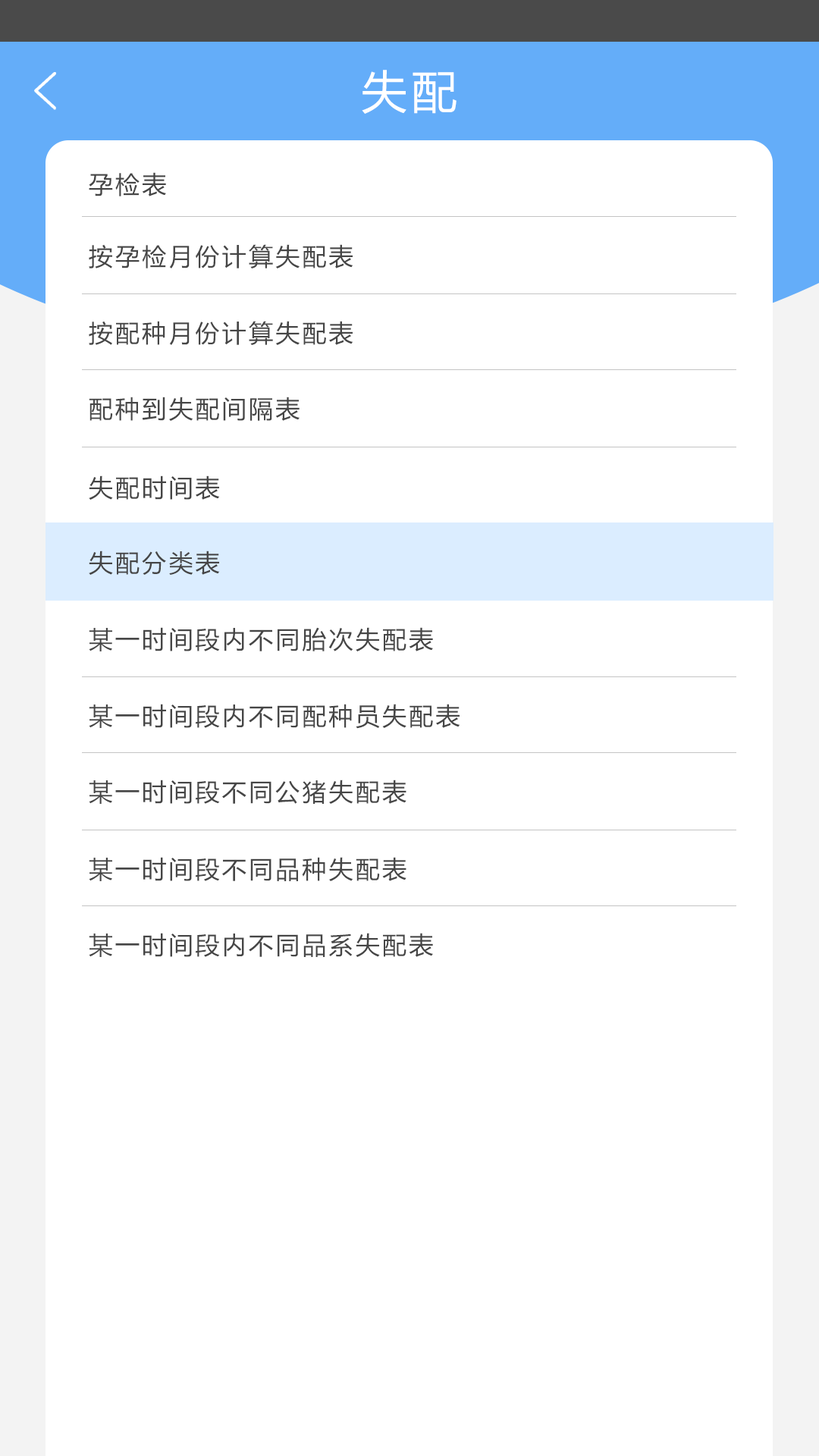
<style>
.page{position:relative;width:819px;height:1456px;background:#ffffff}
.page>*{position:absolute;margin:0}
.t1{font:45.5px "MicrosoftYaHei";letter-spacing:0.1em;color:#ffffff}
.t2{font:24.3px "MicrosoftYaHei";letter-spacing:0.1em;color:#464646}
</style>
<div class="page">
<p class="t1" style="left:362px;top:70px;width:95px;height:44px">失配</p>
<p class="t2" style="left:89px;top:172px;width:77px;height:24px">孕检表</p>
<p class="t2" style="left:89px;top:244px;width:264px;height:24px">按孕检月份计算失配表</p>
<p class="t2" style="left:89px;top:321px;width:264px;height:24px">按配种月份计算失配表</p>
<p class="t2" style="left:89px;top:397px;width:211px;height:24px">配种到失配间隔表</p>
<p class="t2" style="left:89px;top:475px;width:131px;height:25px">失配时间表</p>
<p class="t2" style="left:89px;top:551px;width:131px;height:24px">失配分类表</p>
<p class="t2" style="left:89px;top:627px;width:344px;height:24px">某一时间段内不同胎次失配表</p>
<p class="t2" style="left:89px;top:704px;width:371px;height:25px">某一时间段内不同配种员失配表</p>
<p class="t2" style="left:89px;top:780px;width:317px;height:24px">某一时间段不同公猪失配表</p>
<p class="t2" style="left:89px;top:857px;width:317px;height:24px">某一时间段不同品种失配表</p>
<p class="t2" style="left:89px;top:933px;width:344px;height:24px">某一时间段内不同品系失配表</p>
</div>
